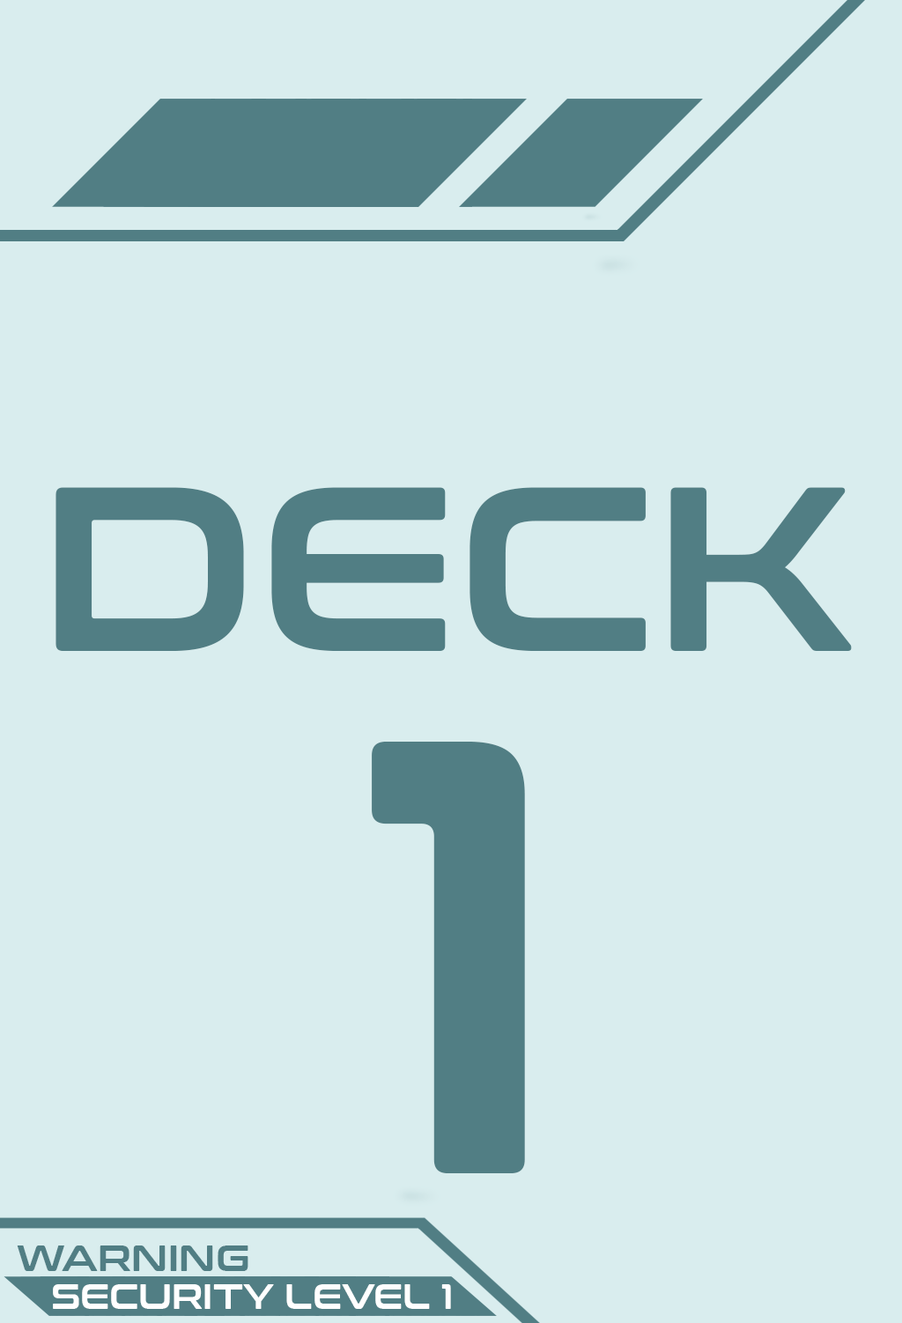
<style>
.page{position:relative;width:902px;height:1323px;background:#d9edee}
.page>*{position:absolute;margin:0}
.t1{font:233.7px "ConthraxSb-Regular";color:#517e84}
.t2{font:616.3px "ConthraxSb-Regular";color:#517e84}
.t3{font:37.4px "ConthraxSb-Regular";color:#517e84}
.t4{font:34.3px "ConthraxSb-Regular";color:#ffffff}
</style>
<div class="page">
<p class="t1" style="left:55px;top:487px;width:796px;height:164px">DECK</p>
<p class="t2" style="left:372px;top:741px;width:153px;height:432px">1</p>
<p class="t3" style="left:17px;top:1245px;width:231px;height:26px">WARNING</p>
<p class="t4" style="left:53px;top:1284px;width:398px;height:24px">SECURITY LEVEL 1</p>
</div>
